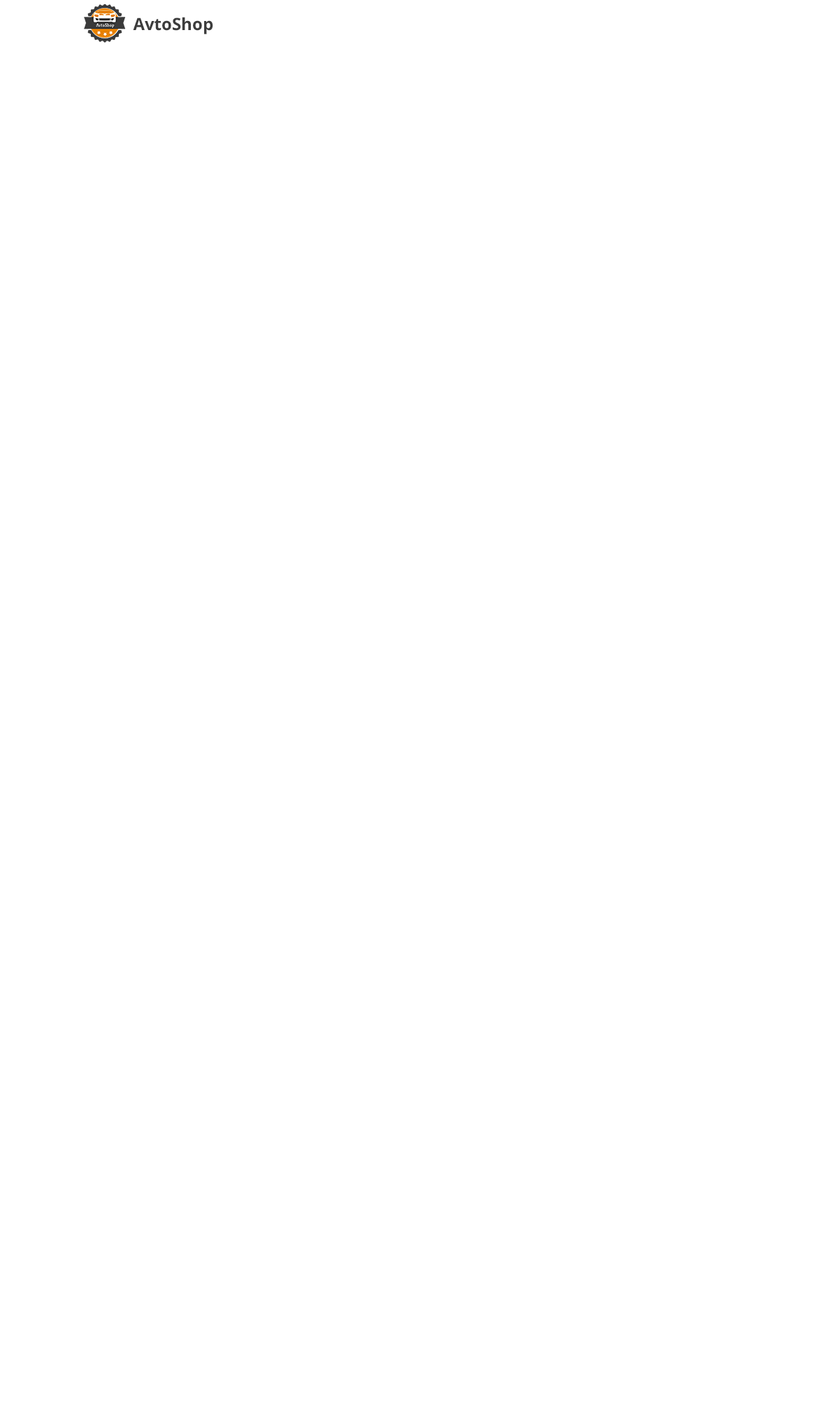
<style>
.page{position:relative;width:839px;height:1421px;background:#ffffff}
.page>*{position:absolute;margin:0}
.t1{font:16.8px "OpenSans-Bold";color:#3c3c3c}
</style>
<div class="page">
<p class="t1" style="left:133px;top:17px;width:80px;height:17px">AvtoShop</p>
</div>
